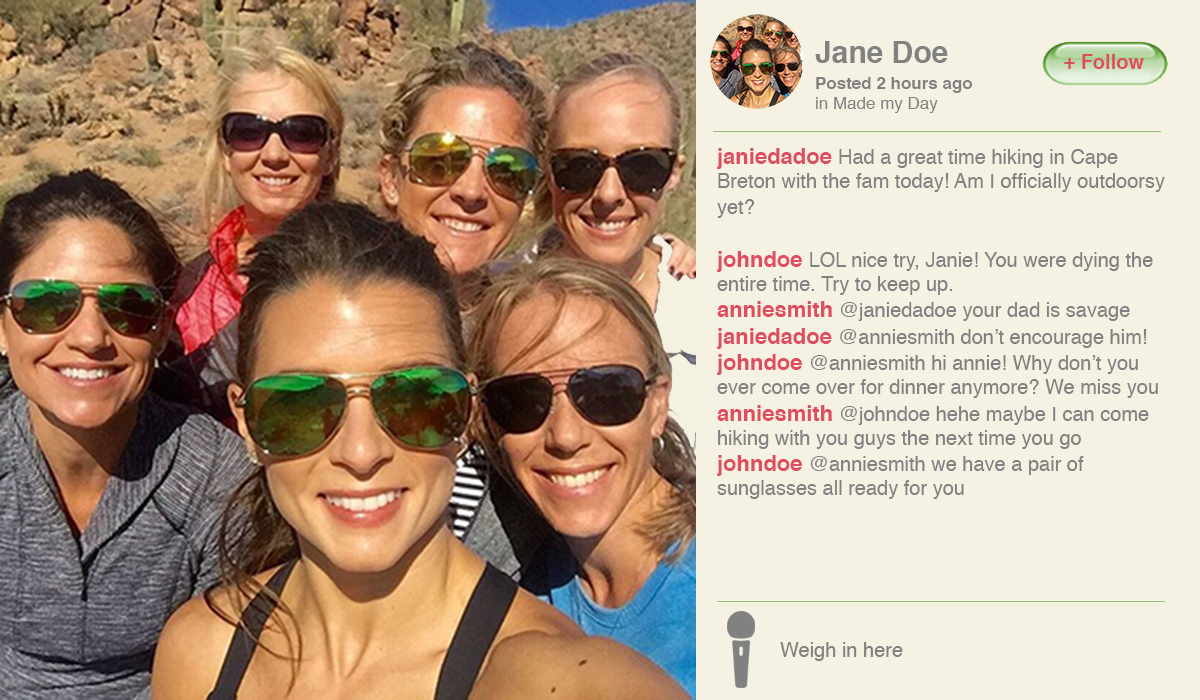
<style>
.page{position:relative;width:1200px;height:700px;background:#f5f2e3}
.page>*{position:absolute;margin:0}
.t1{font:30px "Helvetica-Bold";color:#818181}
.t2{font:20px "Helvetica-Bold";color:#de4e5e}
.t3{font:17px "Helvetica-Bold";color:#818181}
.t4{font:17px "Helvetica";color:#818181}
.t5{font:20px "Helvetica-Bold";color:#818181}
.t6{font:20px "Helvetica";color:#818181}
.t7{font:22px "Helvetica-Bold";color:#de4e5e}
</style>
<div class="page">
<p class="t1" style="left:815px;top:41px;width:133px;height:22px">Jane Doe</p>
<p class="t2" style="left:1064px;top:54px;width:80px;height:15px">Follow +</p>
<p class="t3" style="left:816px;top:77px;width:156px;height:36px">Posted 2 hours ago <br><span class="t4">in Made my Day<br></span><span class="t5">in It</span></p>
<p class="t6" style="left:717px;top:148px;width:448px;height:351px"><span class="t7">janiedadoe </span>Had a great time hiking in Cape Breton with the fam today! Am I officially outdoorsy yet?   <br><br><span class="t7">johndoe </span>LOL nice try, Janie! You were dying the entire time. Try to keep up.<br><span class="t7">anniesmith </span>@janiedadoe your dad is savage<br><span class="t7">janiedadoe </span>@anniesmith don’t encourage him!<br><span class="t7">johndoe </span>@anniesmith hi annie! Why don’t you ever come over for dinner anymore? We miss you<br><span class="t7">anniesmith </span>@johndoe hehe maybe I can come hiking with you guys the next time you go<br><span class="t7">johndoe </span>@anniesmith we have a pair of <br>sunglasses all ready for you</p>
<p class="t6" style="left:780px;top:642px;width:123px;height:19px">Weigh in here</p>
</div>
